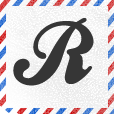
<style>
.page{position:relative;width:114px;height:114px}
.page>*{position:absolute;margin:0}
.t1{font:88px "BallparkWeiner";color:#363636}
</style>
<div class="page">
<p class="t1" style="left:13px;top:18px;width:81px;height:68px">R</p>
</div>
